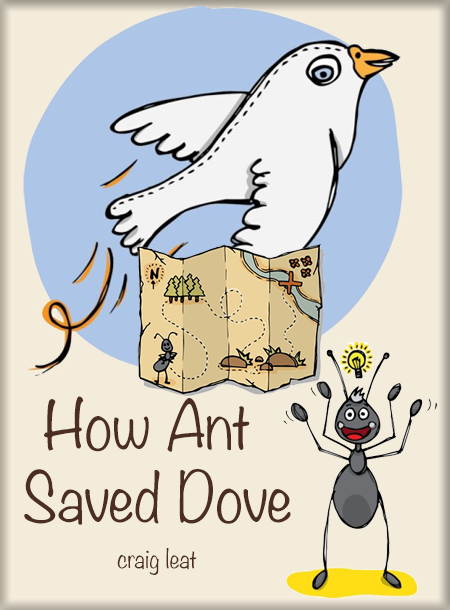
<style>
.page{position:relative;width:450px;height:610px;background:#f4ecdb}
.page>*{position:absolute;margin:0}
.t1{font:60.4px "Noteworthy-Light";color:#4b2d22}
.t2{font:23.4px "Noteworthy-Light";color:#4b2d22}
</style>
<div class="page">
<p class="t1" style="left:24px;top:396px;width:267px;height:129px;text-align:center">How Ant <br>Saved Dove</p>
<p class="t2" style="left:117px;top:548px;width:80px;height:27px">craig leat</p>
</div>
